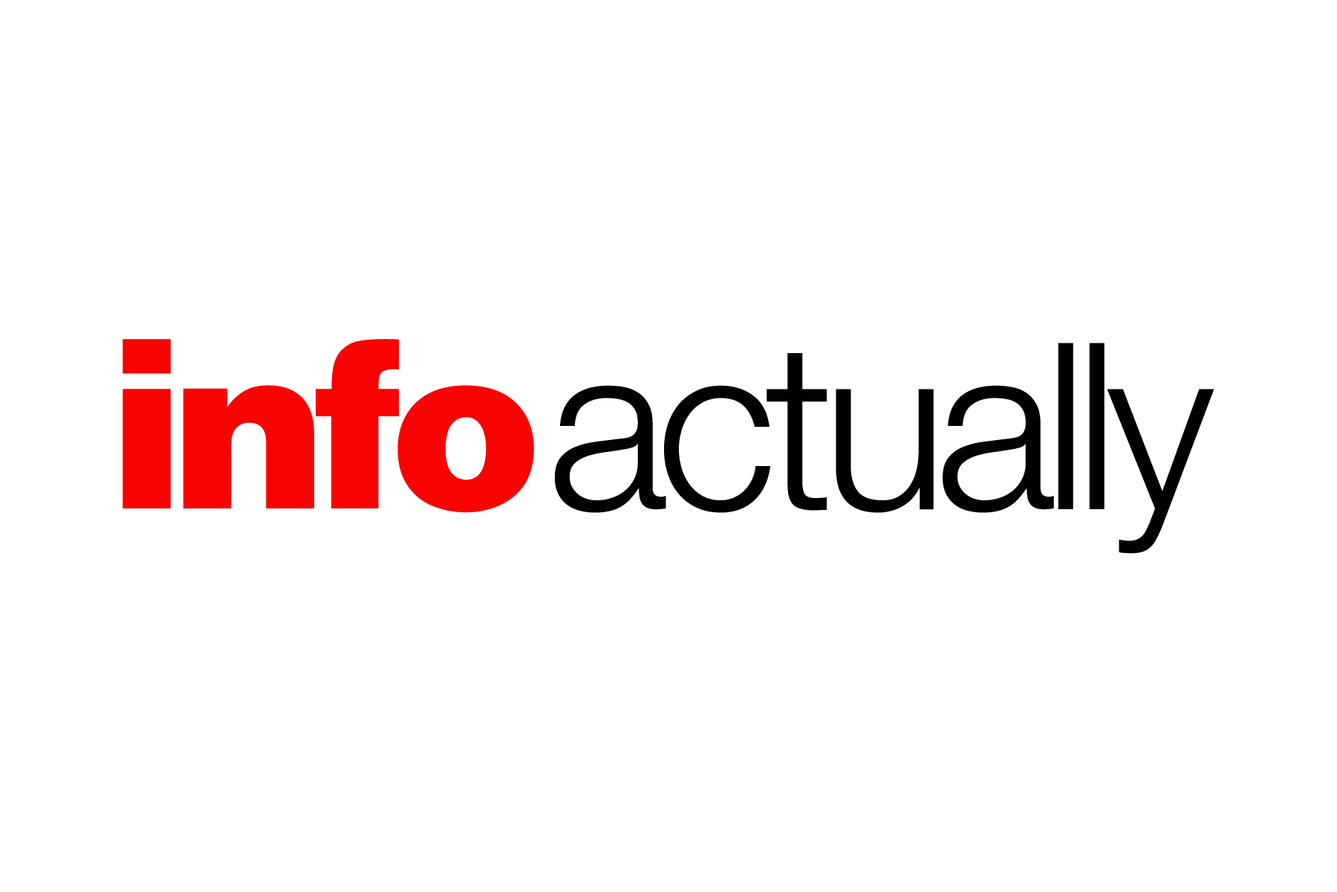
<style>
.page{position:relative;width:1337px;height:892px;background:#ffffff}
.page>*{position:absolute;margin:0}
.t1{font:232.2px "Helvetica-Black";letter-spacing:-0.06em;color:#f90202}
.t2{font:232.2px "HelveticaNeue-Light";letter-spacing:-0.05em;color:#010101}
</style>
<div class="page">
<p class="t1" style="left:123px;top:339px;width:411px;height:174px">info</p>
<p class="t2" style="left:555px;top:343px;width:660px;height:211px">actually</p>
</div>
